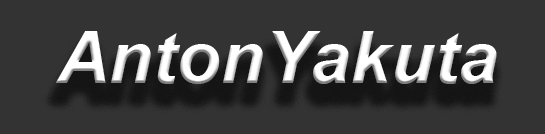
<style>
.page{position:relative;width:545px;height:134px;background:#333333}
.page>*{position:absolute;margin:0}
.t1{font:72px "Arial-BoldItalicMT";color:#ffffff}
</style>
<div class="page">
<p class="t1" style="left:56px;top:31px;width:441px;height:53px">AntonYakuta</p>
</div>
